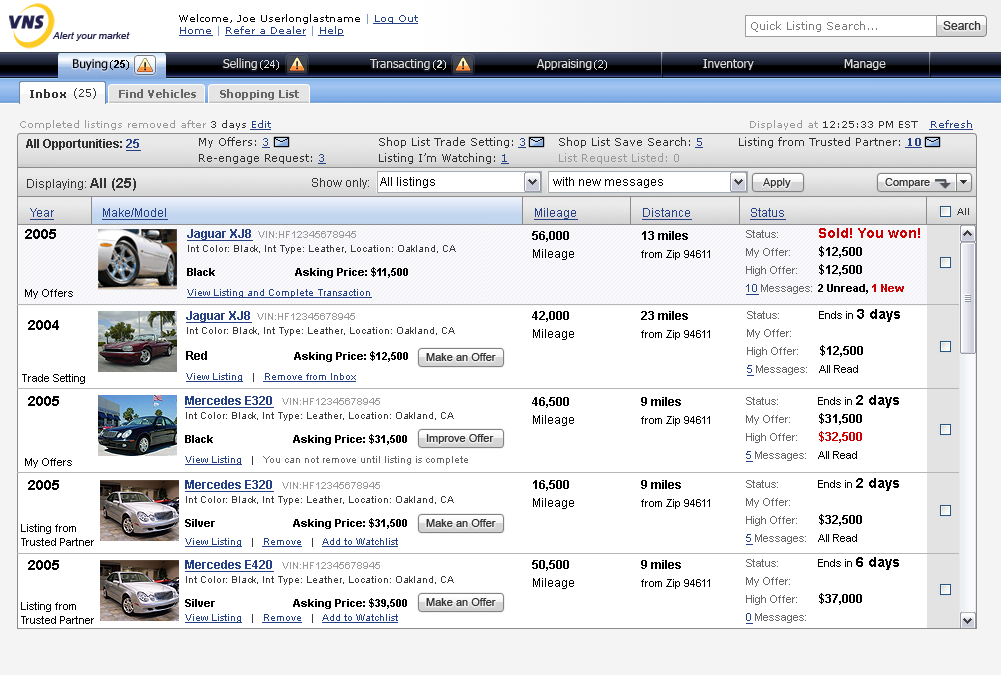
<style>
.page{position:relative;width:1001px;height:675px;background:#ffffff}
.page>*{position:absolute;margin:0}
.t1{font:10px "Verdana";color:#010101}
.t2{font:10px "Verdana";color:#7f9ada}
.t3{font:10px "Verdana";color:#254085;text-decoration:underline}
.t4{font:11px "Verdana";color:#7c7c7c}
.t5{font:12px "ArialMT";color:#333333}
.t6{font:10px "Arial-ItalicMT";color:#24214f}
.t7{font:12px "Tahoma";color:#010101}
.t8{font:11px "Arial-BoldMT";color:#010101}
.t9{font:11px "ArialMT";color:#010101}
.t10{font:12px "Tahoma";color:#dededc}
.t11{font:11px "ArialMT";color:#dededc}
.t12{font:11px "Arial-BoldMT";color:#dededc}
.t13{font:11px "Verdana-Bold";color:#323232}
.t14{font:11px "Verdana";color:#323232}
.t15{font:11px "Verdana-Bold";letter-spacing:-0.05em;color:#666666}
.t16{font:10px "Verdana";color:#999999}
.t17{font:10px "Verdana";color:#333333}
.t18{font:11px/16px "Verdana";color:#2e2f2f}
.t19{font:11px/16px "Verdana";color:#254085;text-decoration:underline}
.t20{font:11px/16px "Verdana-Bold";color:#254085;text-decoration:underline}
.t21{font:11px/16px "Verdana";color:#999999}
.t22{font:12px "Arial-BoldMT";color:#2e2f2f}
.t23{font:12px "Arial-BoldMT";color:#254085;text-decoration:underline}
.t24{font:14px "Arial-BoldMT";color:#333333}
.t25{font:12px "ArialMT";color:#000000}
.t26{font:11px "ArialMT";color:#333333}
.t27{font:12px "ArialMT";color:#254085;text-decoration:underline}
.t28{font:10px "ArialMT";color:#333333}
.t29{font:14px "Arial-BoldMT";color:#000000}
.t30{font:10px/14px "ArialMT";color:#3a3a3a}
.t31{font:12px/14px "Arial-BoldMT";color:#254085;text-decoration:underline}
.t32{font:10px/14px "ArialMT";color:#999999}
.t33{font:11px/12px "Arial-BoldMT";color:#010101}
.t34{font:10px/10px "ArialMT";color:#254085;text-decoration:underline}
.t35{font:12px/18px "ArialMT";color:#000000}
.t36{font:12px/18px "Arial-BoldMT";color:#000000}
.t37{font:11px/18px "ArialMT";color:#000000}
.t38{font:14px/18px "Arial-BoldMT";color:#cc0000}
.t39{font:11px/18px "ArialMT";color:#666666}
.t40{font:11px/18px "ArialMT";color:#254085;text-decoration:underline}
.t41{font:11px/18px "Arial-BoldMT";color:#000000}
.t42{font:11px/18px "Arial-BoldMT";color:#cc0000}
.t43{font:12px/14px "Arial-BoldMT";color:#010101}
.t44{font:10px/10px "ArialMT";color:#3a3a3a}
.t45{font:14px/18px "Arial-BoldMT";color:#000000}
.t46{font:11px "ArialMT";color:#000000}
.t47{font:10px/10px "ArialMT";color:#666666}
.t48{font:12px/18px "Arial-BoldMT";color:#cc0000}
.t49{font:10px/18px "ArialMT";color:#254085;text-decoration:underline}
.t50{font:10px/18px "ArialMT";color:#3a3a3a}
.t51{font:11px/14px "ArialMT";color:#000000}
.t52{font:10px/14px "ArialMT";color:#254085;text-decoration:underline}
</style>
<div class="page">
<p class="t1" style="left:179px;top:14px;width:239px;height:10px">Welcome, Joe Userlonglastname<span class="t2"> | </span><span class="t3">Log Out</span></p>
<p class="t3" style="left:179px;top:26px;width:165px;height:10px">Home <span class="t2">| </span>Refer a Dealer <span class="t2">| </span>Help</p>
<p class="t4" style="left:751px;top:21px;width:126px;height:11px">Quick Listing Search...</p>
<p class="t5" style="left:943px;top:21px;width:38px;height:9px">Search</p>
<p class="t6" style="left:52px;top:32px;width:78px;height:9px">Alert your market</p>
<p class="t7" style="left:73px;top:59px;width:35px;height:12px">Buying</p>
<p class="t8" style="left:110px;top:60px;width:19px;height:10px"><span class="t9"> (</span>25<span class="t9">)</span></p>
<p class="t10" style="left:223px;top:58px;width:34px;height:12px">Selling</p>
<p class="t11" style="left:260px;top:60px;width:19px;height:10px">(24)</p>
<p class="t10" style="left:369px;top:59px;width:61px;height:11px">Transacting</p>
<p class="t11" style="left:433px;top:60px;width:13px;height:10px">(<span class="t12">2</span>)</p>
<p class="t10" style="left:537px;top:59px;width:55px;height:11px">Appraising</p>
<p class="t11" style="left:594px;top:60px;width:13px;height:10px">(2)</p>
<p class="t10" style="left:703px;top:59px;width:51px;height:11px">Inventory</p>
<p class="t10" style="left:844px;top:59px;width:42px;height:11px">Manage</p>
<p class="t13" style="left:30px;top:89px;width:36px;height:9px">Inbox</p>
<p class="t14" style="left:74px;top:88px;width:22px;height:11px"><span class="t13"> </span>(25)</p>
<p class="t15" style="left:119px;top:89px;width:77px;height:9px">Find Vehicles</p>
<p class="t15" style="left:220px;top:89px;width:79px;height:11px">Shopping List</p>
<p class="t16" style="left:20px;top:120px;width:251px;height:10px">Completed listings removed after <span class="t17">3 days </span><span class="t3">Edit</span></p>
<p class="t17" style="left:750px;top:120px;width:223px;height:10px"><span class="t16">Displayed at </span>12:25:33 PM EST   <span class="t3">Refresh</span></p>
<p class="t18" style="left:199px;top:137px;width:723px;height:27px">My Offers: <span class="t19">3</span>    Shop List Trade Setting: <span class="t19">3</span>  Shop List Save Search: <span class="t19">5</span>  Listing from Trusted Partner: <span class="t20">10 <br></span>Re-engage Request: <span class="t19">3 </span>  Listing I’m Watching: <span class="t19">1  </span><span class="t21">List Request Listed: 0</span></p>
<p class="t22" style="left:26px;top:139px;width:115px;height:12px">All Opportunities: <span class="t23">25</span></p>
<p class="t5" style="left:27px;top:178px;width:109px;height:13px">Displaying: <span class="t24">All (25)</span></p>
<p class="t5" style="left:312px;top:178px;width:57px;height:11px">Show only:</p>
<p class="t25" style="left:380px;top:177px;width:55px;height:11px">All listings</p>
<p class="t25" style="left:553px;top:177px;width:110px;height:11px">with new messages</p>
<p class="t26" style="left:763px;top:178px;width:28px;height:10px">Apply</p>
<p class="t26" style="left:885px;top:178px;width:45px;height:10px">Compare</p>
<p class="t27" style="left:30px;top:208px;width:756px;height:12px">Year  Make/Model                Mileage  Distance  Status</p>
<p class="t28" style="left:957px;top:208px;width:12px;height:7px">All</p>
<p class="t29" style="left:25px;top:229px;width:31px;height:10px">2005</p>
<p class="t30" style="left:187px;top:229px;width:269px;height:69px"><span class="t31">Jaguar XJ8  </span><span class="t32">VIN:HF12345678945<br></span>Int Color: Black, Int Type: Leather, Location: Oakland, CA <br><br><span class="t33">Black   Asking Price: $11,500<br><br></span><span class="t34">View Listing and Complete Transaction</span></p>
<p class="t35" style="left:532px;top:231px;width:42px;height:29px"><span class="t36">56,000<br></span>Mileage</p>
<p class="t37" style="left:641px;top:231px;width:69px;height:29px"><span class="t36">13 miles<br></span>from Zip 94611</p>
<p class="t38" style="left:746px;top:228px;width:174px;height:67px"><span class="t39">Status:  </span>Sold! You won!<br><span class="t39">My Offer: </span><span class="t36">$12,500<br></span><span class="t39">High Offer: </span><span class="t36">$12,500<br></span><span class="t40">10</span><span class="t39"> Messages: </span><span class="t41">2 Unread, </span><span class="t42">1 New</span></p>
<p class="t9" style="left:25px;top:289px;width:48px;height:10px">My Offers</p>
<p class="t30" style="left:186px;top:311px;width:269px;height:71px"><span class="t31">Jaguar XJ8  </span><span class="t32">VIN:HF12345678945<br></span>Int Color: Black, Int Type: Leather, Location: Oakland, CA <br><br><span class="t43">Red   </span><span class="t33">Asking Price: $12,500<br></span><span class="t34"><br>View Listing</span><span class="t44">   |   </span><span class="t34">Remove from Inbox</span></p>
<p class="t35" style="left:532px;top:311px;width:42px;height:29px"><span class="t36">42,000<br></span>Mileage</p>
<p class="t37" style="left:641px;top:311px;width:69px;height:29px"><span class="t36">23 miles<br></span>from Zip 94611</p>
<p class="t39" style="left:747px;top:309px;width:153px;height:67px">Status:  <span class="t37">Ends in </span><span class="t45">3 days <br></span>My Offer: <br>High Offer: <span class="t36">$12,500<br></span><span class="t40">5</span> Messages: <span class="t37">All Read</span></p>
<p class="t29" style="left:28px;top:320px;width:31px;height:10px">2004</p>
<p class="t26" style="left:426px;top:353px;width:70px;height:8px">Make an Offer</p>
<p class="t46" style="left:22px;top:374px;width:63px;height:10px">Trade Setting</p>
<p class="t29" style="left:28px;top:396px;width:31px;height:10px">2005</p>
<p class="t30" style="left:185px;top:396px;width:283px;height:69px"><span class="t31">Mercedes E320   </span><span class="t32">VIN:HF12345678945<br></span>Int Color: Black, Int Type: Leather, Location: Oakland, CA <br><br><span class="t33">Black   Asking Price: $31,500<br><br></span><span class="t34">View Listing</span><span class="t44">   |   </span><span class="t47">You can not remove until listing is complete</span></p>
<p class="t35" style="left:532px;top:397px;width:42px;height:29px"><span class="t36">46,500<br></span>Mileage</p>
<p class="t37" style="left:641px;top:397px;width:69px;height:29px"><span class="t36">9 miles<br></span>from Zip 94611</p>
<p class="t39" style="left:746px;top:395px;width:153px;height:67px">Status:  <span class="t37">Ends in </span><span class="t45">2 days<br></span>My Offer: <span class="t36">$31,500<br></span>High Offer: <span class="t48">$32,500<br></span><span class="t40">5</span> Messages: <span class="t37">All Read</span></p>
<p class="t26" style="left:426px;top:434px;width:68px;height:10px">Improve Offer</p>
<p class="t46" style="left:25px;top:458px;width:47px;height:10px">My Offers</p>
<p class="t29" style="left:28px;top:480px;width:31px;height:10px">2005</p>
<p class="t30" style="left:185px;top:480px;width:269px;height:67px"><span class="t31">Mercedes E320   </span><span class="t32">VIN:HF12345678945<br></span>Int Color: Black, Int Type: Leather, Location: Oakland, CA <br><br><span class="t33">Silver   Asking Price: $31,500<br></span><span class="t49">View Listing</span><span class="t50">   |   </span><span class="t49">Remove</span><span class="t50">   |   </span><span class="t49">Add to Watchlist</span></p>
<p class="t35" style="left:533px;top:480px;width:41px;height:29px"><span class="t36">16,500<br></span>Mileage</p>
<p class="t37" style="left:641px;top:480px;width:69px;height:29px"><span class="t36">9 miles<br></span>from Zip 94611</p>
<p class="t39" style="left:746px;top:478px;width:153px;height:67px">Status:  <span class="t37">Ends in </span><span class="t45">2 days<br></span>My Offer:<br>High Offer: <span class="t36">$32,500<br></span><span class="t40">5</span> Messages: <span class="t37">All Read</span></p>
<p class="t26" style="left:426px;top:519px;width:70px;height:8px">Make an Offer</p>
<p class="t51" style="left:21px;top:524px;width:73px;height:22px">Listing from<br>Trusted Partner</p>
<p class="t39" style="left:746px;top:557px;width:153px;height:67px">Status:  <span class="t37">Ends in </span><span class="t45">6 days<br></span>My Offer:<br>High Offer: <span class="t36">$37,000<br></span><span class="t40">0</span> Messages:</p>
<p class="t29" style="left:28px;top:560px;width:31px;height:10px">2005</p>
<p class="t30" style="left:185px;top:560px;width:269px;height:63px"><span class="t31">Mercedes E420   </span><span class="t32">VIN:HF12345678945<br></span>Int Color: Black, Int Type: Leather, Location: Oakland, CA <br><br><span class="t33">Silver   Asking Price: $39,500<br></span><span class="t52">View Listing</span>   |   <span class="t52">Remove</span>   |   <span class="t52">Add to Watchlist</span></p>
<p class="t35" style="left:532px;top:560px;width:42px;height:29px"><span class="t36">50,500<br></span>Mileage</p>
<p class="t37" style="left:641px;top:560px;width:69px;height:29px"><span class="t36">9 miles<br></span>from Zip 94611</p>
<p class="t51" style="left:21px;top:602px;width:73px;height:22px">Listing from<br>Trusted Partner</p>
<p class="t26" style="left:426px;top:598px;width:70px;height:8px">Make an Offer</p>
</div>
